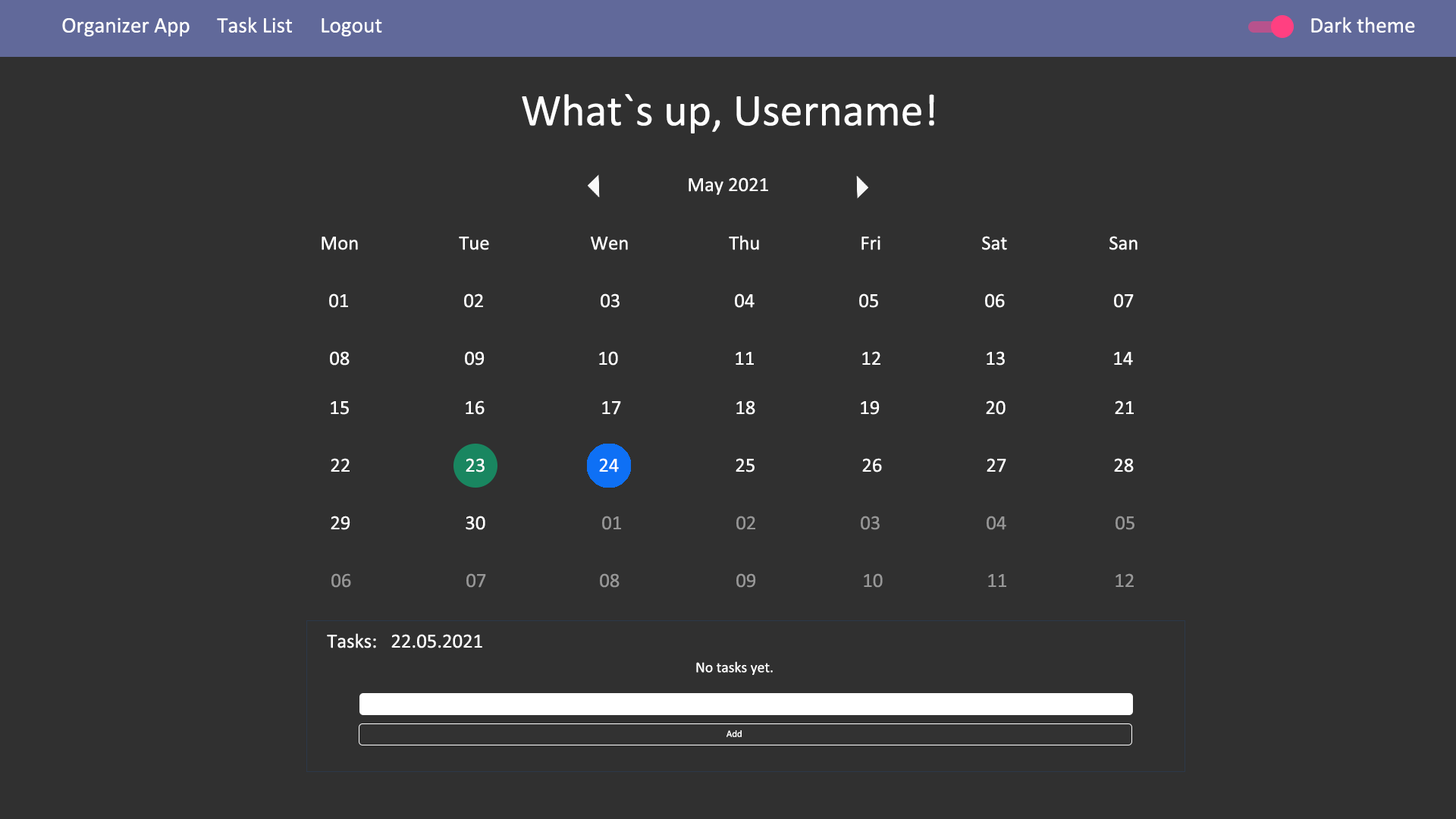
<style>
.page{position:relative;width:1456px;height:819px;background:#303030}
.page>*{position:absolute;margin:0}
.t1{font:22.1px "Calibri";color:#ffffff}
.t2{font:45.5px "Calibri";color:#ffffff}
.t3{font:20.3px "Calibri";color:#ffffff}
.t4{font:20.3px "Calibri";color:#969696}
.t5{font:20.3px "Calibri";color:#979797}
.t6{font:15px "Calibri";color:#ffffff}
.t7{font:9.7px "Calibri";color:#ffffff}
</style>
<div class="page">
<p class="t1" style="left:62px;top:17px;width:128px;height:19px">Organizer App</p>
<p class="t1" style="left:217px;top:17px;width:75px;height:16px">Task List</p>
<p class="t1" style="left:1311px;top:17px;width:104px;height:16px">Dark theme</p>
<p class="t1" style="left:322px;top:18px;width:60px;height:18px">Logout</p>
<p class="t2" style="left:522px;top:94px;width:412px;height:39px">What`s up, Username!</p>
<p class="t3" style="left:689px;top:177px;width:79px;height:18px">May 2021</p>
<p class="t3" style="left:322px;top:237px;width:36px;height:13px">Mon</p>
<p class="t3" style="left:459px;top:237px;width:30px;height:13px">Tue</p>
<p class="t3" style="left:591px;top:237px;width:37px;height:13px">Wen</p>
<p class="t3" style="left:729px;top:235px;width:30px;height:15px">Thu</p>
<p class="t3" style="left:861px;top:236px;width:19px;height:14px">Fri</p>
<p class="t3" style="left:982px;top:236px;width:25px;height:14px">Sat</p>
<p class="t3" style="left:1109px;top:236px;width:28px;height:14px">San</p>
<p class="t3" style="left:329px;top:293px;width:19px;height:15px">01</p>
<p class="t3" style="left:464px;top:293px;width:19px;height:15px">02</p>
<p class="t3" style="left:601px;top:293px;width:19px;height:15px">03</p>
<p class="t3" style="left:735px;top:293px;width:20px;height:15px">04</p>
<p class="t3" style="left:859px;top:293px;width:19px;height:15px">05</p>
<p class="t3" style="left:985px;top:293px;width:20px;height:15px">06</p>
<p class="t3" style="left:1114px;top:293px;width:20px;height:15px">07</p>
<p class="t3" style="left:330px;top:351px;width:20px;height:15px">08</p>
<p class="t3" style="left:465px;top:351px;width:20px;height:15px">09</p>
<p class="t3" style="left:599px;top:351px;width:19px;height:15px">10</p>
<p class="t3" style="left:736px;top:352px;width:18px;height:13px">11</p>
<p class="t3" style="left:862px;top:351px;width:18px;height:14px">12</p>
<p class="t3" style="left:987px;top:351px;width:18px;height:15px">13</p>
<p class="t3" style="left:1114px;top:352px;width:19px;height:14px">14</p>
<p class="t3" style="left:331px;top:401px;width:18px;height:14px">15</p>
<p class="t3" style="left:466px;top:400px;width:19px;height:15px">16</p>
<p class="t3" style="left:602px;top:401px;width:19px;height:14px">17</p>
<p class="t3" style="left:736px;top:400px;width:19px;height:15px">18</p>
<p class="t3" style="left:861px;top:400px;width:19px;height:15px">19</p>
<p class="t3" style="left:986px;top:400px;width:20px;height:15px">20</p>
<p class="t3" style="left:1115px;top:400px;width:19px;height:14px">21</p>
<p class="t3" style="left:331px;top:458px;width:19px;height:14px">22</p>
<p class="t3" style="left:466px;top:458px;width:19px;height:14px">23</p>
<p class="t3" style="left:599px;top:458px;width:20px;height:14px">24</p>
<p class="t3" style="left:736px;top:458px;width:19px;height:14px">25</p>
<p class="t3" style="left:862px;top:458px;width:20px;height:14px">26</p>
<p class="t3" style="left:987px;top:458px;width:19px;height:14px">27</p>
<p class="t3" style="left:1114px;top:458px;width:20px;height:14px">28</p>
<p class="t3" style="left:331px;top:516px;width:19px;height:14px">29</p>
<p class="t3" style="left:466px;top:516px;width:19px;height:14px">30</p>
<p class="t4" style="left:602px;top:516px;width:19px;height:14px">01</p>
<p class="t4" style="left:736px;top:516px;width:19px;height:14px">02</p>
<p class="t4" style="left:861px;top:516px;width:19px;height:14px">03</p>
<p class="t4" style="left:987px;top:516px;width:19px;height:14px">04</p>
<p class="t4" style="left:1115px;top:516px;width:19px;height:14px">05</p>
<p class="t5" style="left:331px;top:573px;width:20px;height:15px">06</p>
<p class="t5" style="left:466px;top:573px;width:20px;height:15px">07</p>
<p class="t5" style="left:600px;top:573px;width:20px;height:15px">08</p>
<p class="t5" style="left:736px;top:573px;width:20px;height:15px">09</p>
<p class="t5" style="left:864px;top:573px;width:19px;height:15px">10</p>
<p class="t5" style="left:988px;top:574px;width:18px;height:13px">11</p>
<p class="t5" style="left:1115px;top:573px;width:19px;height:14px">12</p>
<p class="t3" style="left:327px;top:633px;width:155px;height:15px">Tasks:   22.05.2021</p>
<p class="t6" style="left:696px;top:661px;width:77px;height:14px">No tasks yet.</p>
<p class="t7" style="left:726px;top:730px;width:16px;height:7px">Add</p>
</div>
